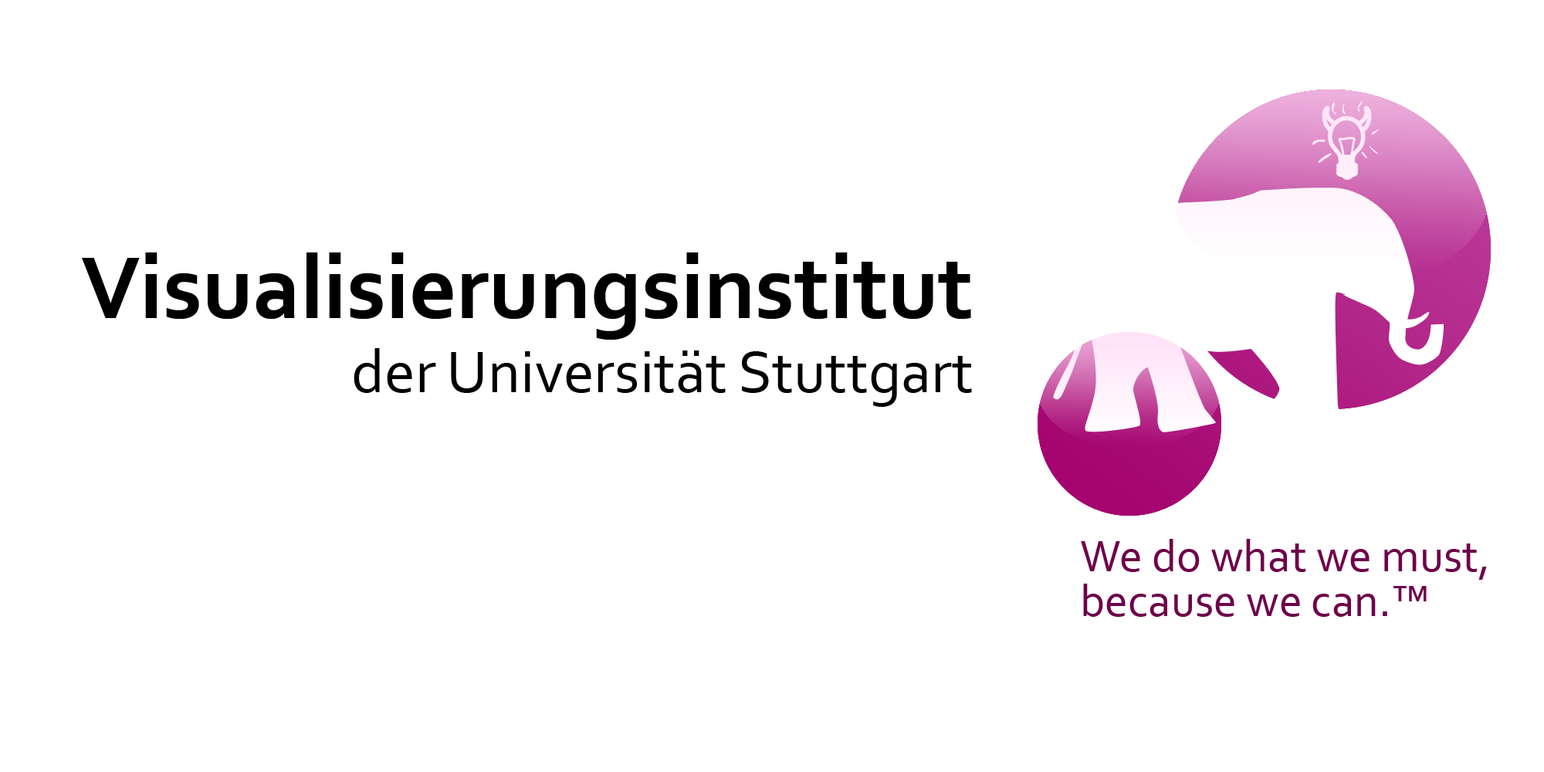
<style>
.page{position:relative;width:1544px;height:772px;background:#ffffff}
.page>*{position:absolute;margin:0}
.t1{font:61.8px/55.6px "Corbel";color:#000000}
.t2{font:92.7px "Corbel-Bold";color:#000000}
.t3{font:92.7px/55.6px "Corbel-Bold";color:#000000}
.t4{font:61.8px "Corbel";color:#000000}
.t5{font:46.3px/44.8px "Corbel";color:#6e014a}
</style>
<div class="page">
<p class="t1" style="left:82px;top:252px;width:890px;height:155px;text-align:right"><span class="t2">Visualisierung</span><span class="t3">sinstitut<br></span>der Universität Stuttga<span class="t4">rt</span></p>
<p class="t5" style="left:1081px;top:539px;width:406px;height:78px">We do what we must, <br>because we can.™</p>
</div>
